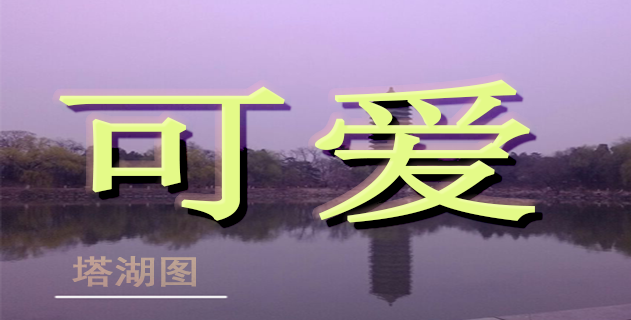
<style>
.page{position:relative;width:631px;height:320px}
.page>*{position:absolute;margin:0}
.t1{font:150.6px "SimSun";color:#e4fa88;font-weight:bold;scale:1.62 1}
.t2{font:33px "SimHei";color:#bb9d91;font-weight:bold;scale:1.26 1}
</style>
<div class="page">
<p class="t1" style="left:59px;top:79px;width:476px;height:144px">可爱</p>
<p class="t2" style="left:72px;top:256px;width:124px;height:31px">塔湖图</p>
</div>
